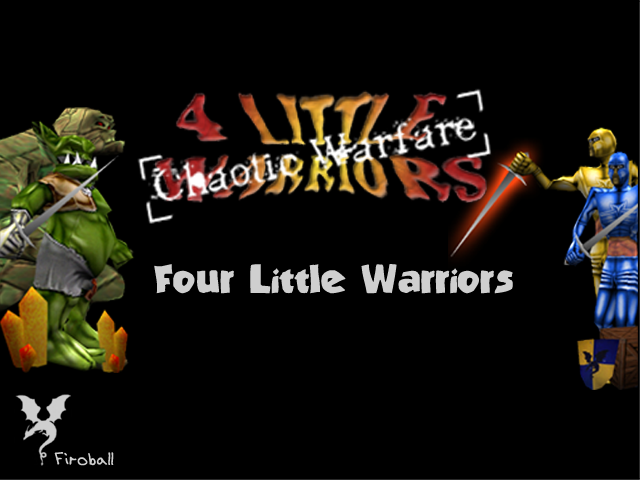
<style>
.page{position:relative;width:640px;height:480px;background:#000000}
.page>*{position:absolute;margin:0}
.t1{font:30px "StrandedBRK";color:#cfcfcf}
.t2{font:19.2px "AEnigmaScrawl4BRK";letter-spacing:0.05em;color:#cfcfcf}
</style>
<div class="page">
<p class="t1" style="left:154px;top:264px;width:359px;height:30px">Four Little Warriors</p>
<p class="t2" style="left:54px;top:452px;width:60px;height:14px">Firoball</p>
</div>
